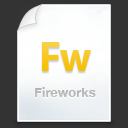
<style>
.page{position:relative;width:128px;height:128px;background:#333333}
.page>*{position:absolute;margin:0}
.t1{font:42px "MyriadPro-Bold"}
.t2{font:13px "HelveticaNeue-Bold";color:#cccccc}
</style>
<div class="page">
<p class="t1" style="left:42px;top:42px;width:49px;height:29px">Fw</p>
<p class="t2" style="left:35px;top:87px;width:61px;height:10px">Fireworks</p>
</div>
